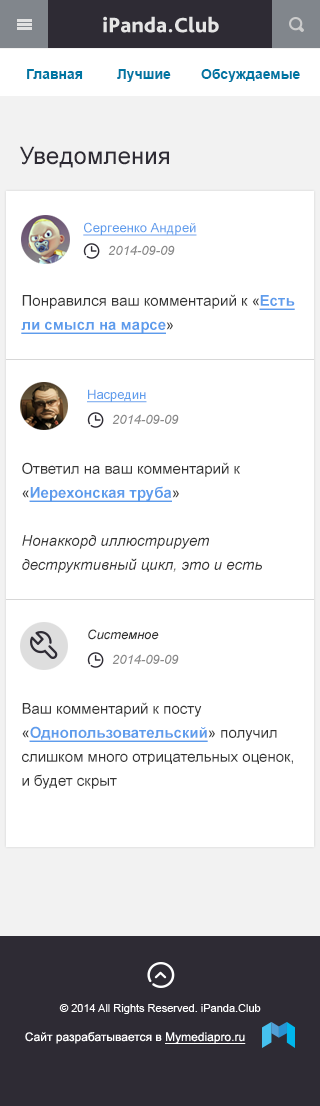
<style>
.page{position:relative;width:320px;height:1106px;background:#ffffff}
.page>*{position:absolute;margin:0}
.t1{font:14px "Arial-BoldMT";color:#0076a3}
.t2{font:24px "ArialMT";color:#2e2b34}
.t3{font:13px "ArialMT";color:#5d9cec;text-decoration:underline}
.t4{font:13px "Arial-ItalicMT";color:#898989}
.t5{font:15px/24px "ArialMT";color:#363636}
.t6{font:15px/24px "Arial-BoldMT";color:#5d9cec;text-decoration:underline}
.t7{font:15px/24px "Arial-ItalicMT";color:#363636}
.t8{font:13px "Arial-ItalicMT";color:#363636}
</style>
<div class="page">
<p class="t1" style="left:27px;top:69px;width:56px;height:10px">Главная</p>
<p class="t1" style="left:117px;top:69px;width:54px;height:13px">Лучшие</p>
<p class="t1" style="left:201px;top:69px;width:99px;height:13px">Обсуждаемые</p>
<p class="t2" style="left:20px;top:146px;width:149px;height:22px">Уведомления</p>
<p class="t3" style="left:83px;top:222px;width:114px;height:14px">Сергеенко Андрей</p>
<p class="t4" style="left:108px;top:245px;width:67px;height:10px">2014-09-09</p>
<p class="t5" style="left:21px;top:294px;width:274px;height:40px">Понравился ваш комментарий к «<span class="t6">Есть ли смысл на марсе</span>»</p>
<p class="t3" style="left:87px;top:389px;width:60px;height:14px">Насредин</p>
<p class="t4" style="left:112px;top:414px;width:67px;height:10px">2014-09-09</p>
<p class="t7" style="left:22px;top:462px;width:240px;height:111px"><span class="t5">Ответил на ваш комментарий к «</span><span class="t6">Иерехонская труба</span><span class="t5">»<br></span><br>Нонаккорд иллюстрирует деструктивный цикл, это и есть</p>
<p class="t8" style="left:88px;top:629px;width:71px;height:11px">Системное</p>
<p class="t4" style="left:112px;top:654px;width:67px;height:10px">2014-09-09</p>
<p class="t5" style="left:22px;top:702px;width:271px;height:87px">Ваш комментарий к посту «<span class="t6">Однопользовательский</span>» получил слишком много отрицательных оценок, и будет скрыт</p>
</div>
